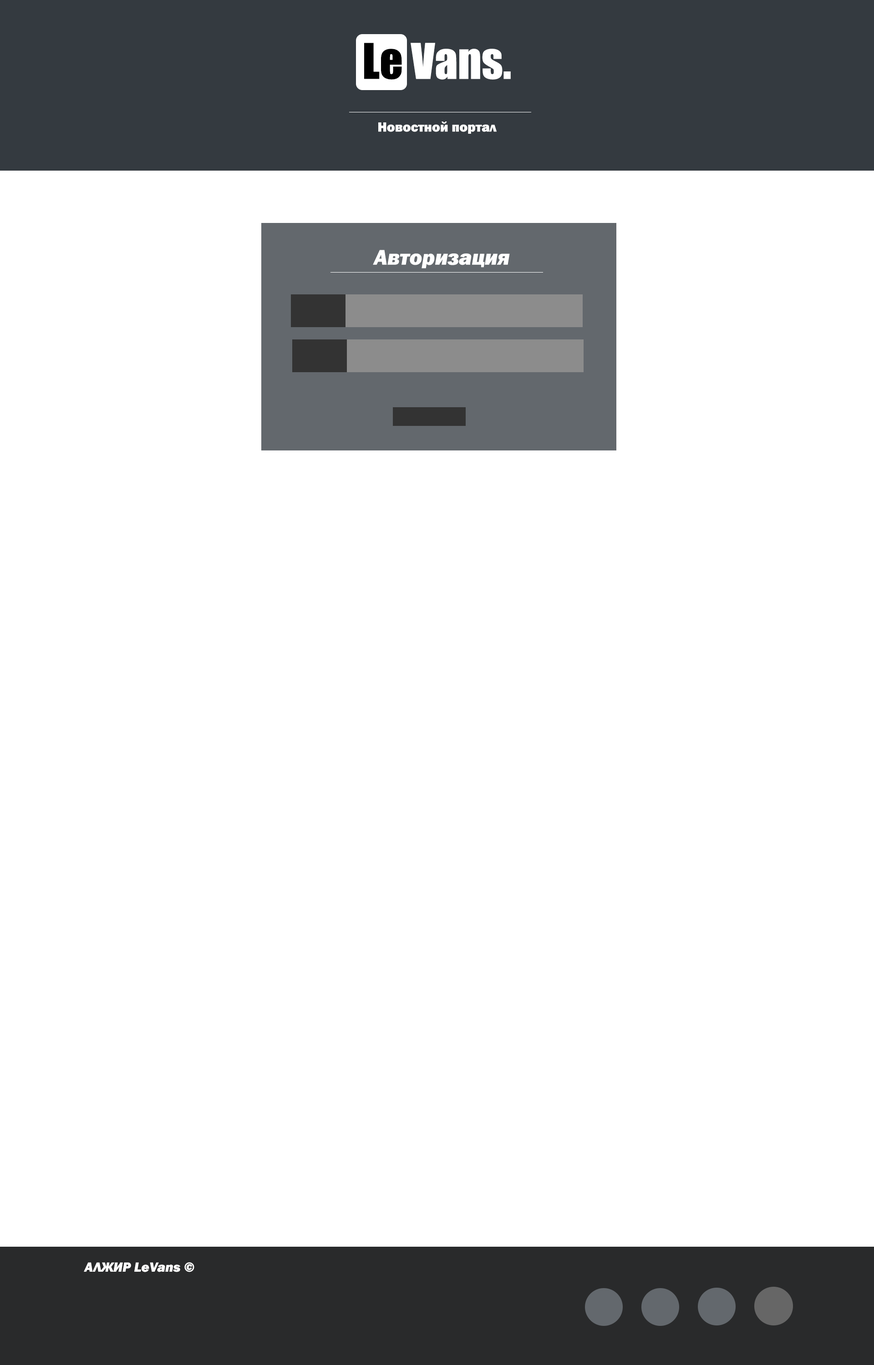
<style>
.page{position:relative;width:874px;height:1365px;background:#ffffff}
.page>*{position:absolute;margin:0}
.t1{font:13.6px "FranklinGothic-Heavy";color:#ffffff}
.t2{font:21.8px "FranklinGothic-HeavyItalic";color:#ffffff}
.t3{font:13.6px "FranklinGothic-HeavyItalic";color:#ffffff}
</style>
<div class="page">
<p class="t1" style="left:378px;top:121px;width:118px;height:13px">Новостной портал</p>
<p class="t2" style="left:373px;top:250px;width:137px;height:18px">Авторизация</p>
<p class="t3" style="left:84px;top:1262px;width:110px;height:10px">АЛЖИР LeVans ©</p>
</div>
